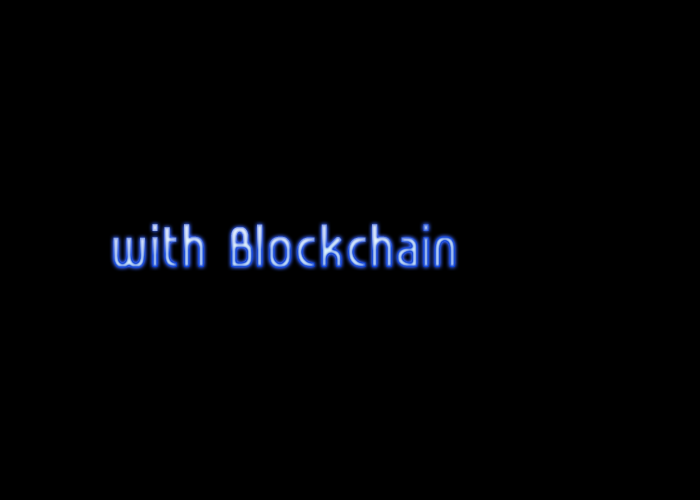
<style>
.page{position:relative;width:700px;height:500px;background:#000000}
.page>*{position:absolute;margin:0}
.t1{font:69.4px "ahn2006-L";font-weight:bold}
</style>
<div class="page">
<p class="t1" style="left:113px;top:224px;width:342px;height:44px">with Blockchain</p>
</div>
